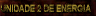
<style>
.page{position:relative;width:96px;height:16px}
.page>*{position:absolute;margin:0}
.t1{font:10px "Arial-BoldMT";text-transform:uppercase;scale:0.76 1}
</style>
<div class="page">
<p class="t1" style="left:1px;top:4px;width:90px;height:8px">unidade 2 de energia</p>
</div>
